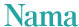
<style>
.page{position:relative;width:79px;height:27px;background:#ffffff}
.page>*{position:absolute;margin:0}
.t1{font:30px "RyuminPro-ExBold";letter-spacing:-0.08em;color:#26a3a3}
</style>
<div class="page">
<p class="t1" style="left:4px;top:4px;width:75px;height:23px">Nama</p>
</div>
